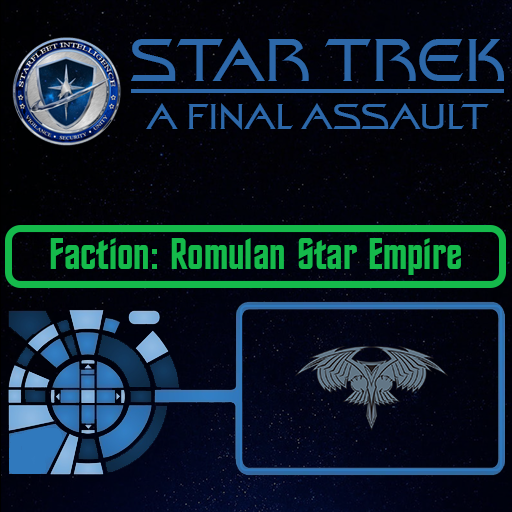
<style>
.page{position:relative;width:512px;height:512px}
.page>*{position:absolute;margin:0}
.t1{font:60px "StarTrekFilmBT-Regular";color:#2d68a9}
.t2{font:36px "StarTrekFilmBT-Regular";color:#2d68a9}
.t3{font:44px "StarTrekBT-Regular";color:#15ba4b}
</style>
<div class="page">
<p class="t1" style="left:131px;top:38px;width:373px;height:43px">STAR TREK</p>
<p class="t2" style="left:146px;top:103px;width:343px;height:27px">A FINAL ASSAULT</p>
<p class="t3" style="left:50px;top:238px;width:411px;height:37px">Faction: Romulan Star Empire</p>
</div>
